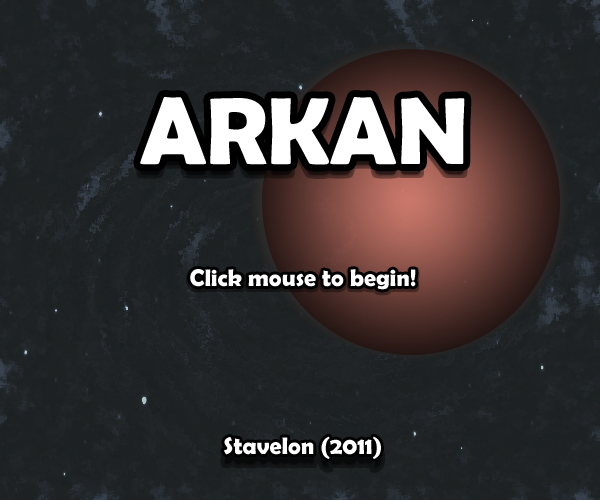
<style>
.page{position:relative;width:600px;height:500px}
.page>*{position:absolute;margin:0}
.t1{font:96px "BerlinSansFBDemi-Bold";color:#ffffff}
.t2{font:24px "BerlinSansFBDemi-Bold";color:#ffffff}
</style>
<div class="page">
<p class="t1" style="left:140px;top:97px;width:325px;height:68px">ARKAN</p>
<p class="t2" style="left:190px;top:269px;width:226px;height:21px">Click mouse to begin!</p>
<p class="t2" style="left:224px;top:436px;width:157px;height:23px">Stavelon (2011)</p>
</div>
